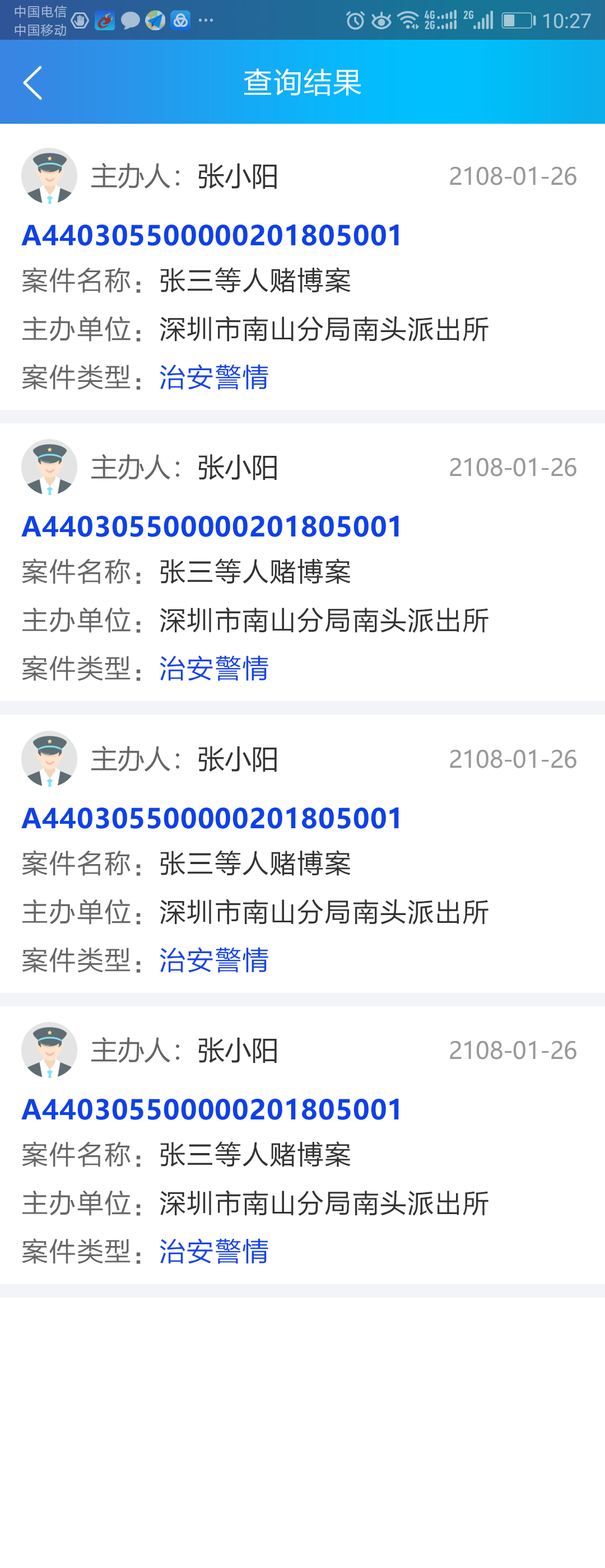
<style>
.page{position:relative;width:605px;height:1568px;background:#ffffff}
.page>*{position:absolute;margin:0}
.t1{font:29.1px "FZLTHK--GBK1-0";letter-spacing:0.025em;color:#ffffff}
.t2{font:26.9px "MicrosoftYaHei";color:#666666}
.t3{font:26.9px "MicrosoftYaHei";color:#333333}
.t4{font:23.5px "MicrosoftYaHei";letter-spacing:-0.01em;color:#999999}
.t5{font:26.9px "MicrosoftYaHei-Bold";letter-spacing:0.025em;color:#0e41e9}
.t6{font:26.9px "FZLTHK--GBK1-0";letter-spacing:0.025em;color:#333333}
.t7{font:26.9px "FZLTHK--GBK1-0";letter-spacing:0.025em;color:#666666}
.t8{font:26.9px "FZLTHK--GBK1-0";letter-spacing:0.025em;color:#1544e9}
</style>
<div class="page">
<p class="t1" style="left:244px;top:68px;width:117px;height:28px">查询结果</p>
<p class="t2" style="left:91px;top:162px;width:186px;height:27px">主办人：<span class="t3">张小阳</span></p>
<p class="t4" style="left:450px;top:166px;width:126px;height:19px">2108-01-26</p>
<p class="t5" style="left:21px;top:224px;width:378px;height:22px">A440305500000201805001</p>
<p class="t6" style="left:22px;top:267px;width:329px;height:26px"><span class="t7">案件名称：</span>张三等人赌博案</p>
<p class="t6" style="left:22px;top:316px;width:466px;height:26px"><span class="t7">主办单位：</span>深圳市南山分局南头派出所</p>
<p class="t7" style="left:22px;top:364px;width:246px;height:26px">案件类型：<span class="t8">治安警情</span></p>
<p class="t2" style="left:91px;top:454px;width:186px;height:26px">主办人：<span class="t3">张小阳</span></p>
<p class="t4" style="left:450px;top:458px;width:126px;height:19px">2108-01-26</p>
<p class="t5" style="left:21px;top:515px;width:378px;height:22px">A440305500000201805001</p>
<p class="t6" style="left:22px;top:558px;width:329px;height:26px"><span class="t7">案件名称：</span>张三等人赌博案</p>
<p class="t6" style="left:22px;top:607px;width:466px;height:26px"><span class="t7">主办单位：</span>深圳市南山分局南头派出所</p>
<p class="t7" style="left:22px;top:655px;width:246px;height:26px">案件类型：<span class="t8">治安警情</span></p>
<p class="t2" style="left:91px;top:745px;width:186px;height:27px">主办人：<span class="t3">张小阳</span></p>
<p class="t4" style="left:450px;top:749px;width:126px;height:19px">2108-01-26</p>
<p class="t5" style="left:21px;top:807px;width:378px;height:22px">A440305500000201805001</p>
<p class="t6" style="left:22px;top:850px;width:329px;height:26px"><span class="t7">案件名称：</span>张三等人赌博案</p>
<p class="t6" style="left:22px;top:899px;width:466px;height:26px"><span class="t7">主办单位：</span>深圳市南山分局南头派出所</p>
<p class="t7" style="left:22px;top:947px;width:246px;height:26px">案件类型：<span class="t8">治安警情</span></p>
<p class="t2" style="left:91px;top:1037px;width:186px;height:26px">主办人：<span class="t3">张小阳</span></p>
<p class="t4" style="left:450px;top:1040px;width:126px;height:20px">2108-01-26</p>
<p class="t5" style="left:21px;top:1098px;width:378px;height:22px">A440305500000201805001</p>
<p class="t6" style="left:22px;top:1141px;width:329px;height:26px"><span class="t7">案件名称：</span>张三等人赌博案</p>
<p class="t6" style="left:22px;top:1190px;width:466px;height:26px"><span class="t7">主办单位：</span>深圳市南山分局南头派出所</p>
<p class="t7" style="left:22px;top:1238px;width:246px;height:26px">案件类型：<span class="t8">治安警情</span></p>
</div>
